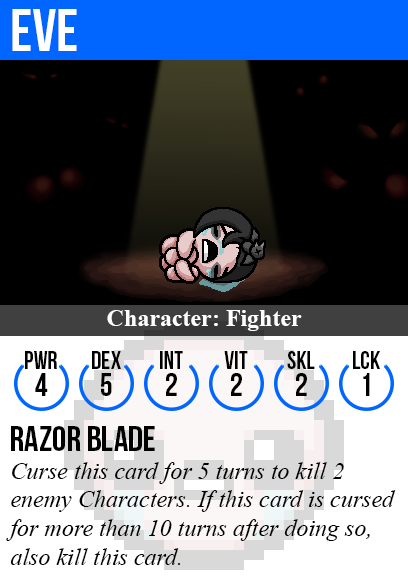
<style>
.page{position:relative;width:408px;height:585px;background:#000000}
.page>*{position:absolute;margin:0}
.t1{font:60px "BebasNeue";color:#ffffff}
.t2{font:24px "TimesNewRomanPS-BoldMT";color:#ffffff}
.t3{font:25px "BebasNeue";color:#000000}
.t4{font:32px "BebasNeue";color:#000000}
.t5{font:36px "BebasNeue";color:#000000}
.t6{font:24px "TimesNewRomanPS-ItalicMT";color:#000000}
</style>
<div class="page">
<p class="t1" style="left:12px;top:9px;width:65px;height:42px">eve</p>
<p class="t2" style="left:107px;top:310px;width:195px;height:21px">Character: Fighter</p>
<p class="t3" style="left:25px;top:351px;width:32px;height:18px">PWR</p>
<p class="t3" style="left:92px;top:351px;width:29px;height:18px">dex</p>
<p class="t3" style="left:160px;top:351px;width:23px;height:18px">int</p>
<p class="t3" style="left:224px;top:351px;width:24px;height:18px">vit</p>
<p class="t3" style="left:287px;top:351px;width:28px;height:18px">skl</p>
<p class="t3" style="left:353px;top:351px;width:27px;height:18px">lck</p>
<p class="t4" style="left:35px;top:373px;width:13px;height:23px">4</p>
<p class="t4" style="left:101px;top:373px;width:11px;height:23px">5</p>
<p class="t4" style="left:166px;top:373px;width:11px;height:23px">2</p>
<p class="t4" style="left:231px;top:373px;width:11px;height:23px">2</p>
<p class="t4" style="left:296px;top:373px;width:11px;height:23px">2</p>
<p class="t4" style="left:363px;top:373px;width:7px;height:23px">1</p>
<p class="t5" style="left:11px;top:426px;width:144px;height:25px">razor blade</p>
<p class="t6" style="left:6px;top:462px;width:390px;height:103px">Curse this card for 5 turns to kill 2<br>enemy Characters. If this card is cursed<br>for more than 10 turns after doing so,<br>also kill this card.</p>
</div>
